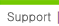
<style>
.page{position:relative;width:59px;height:26px;background:#ffffff}
.page>*{position:absolute;margin:0}
.t1{font:12px "Gulim";color:#626262}
</style>
<div class="page">
<p class="t1" style="left:7px;top:12px;width:44px;height:11px">Support</p>
</div>
